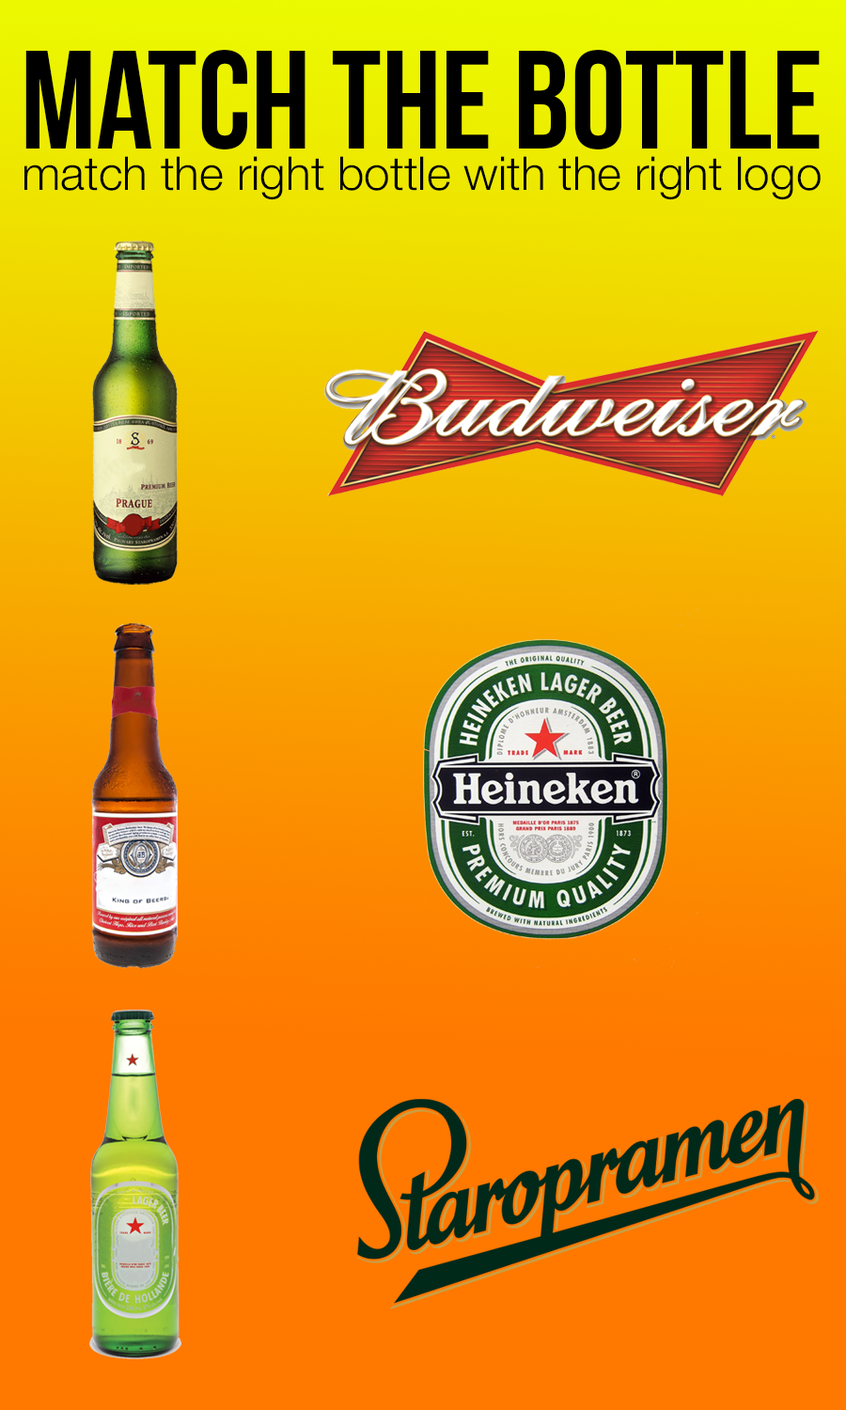
<style>
.page{position:relative;width:846px;height:1410px}
.page>*{position:absolute;margin:0}
.t1{font:139.3px "BebasNeue";color:#000000}
.t2{font:46.6px "HelveticaNeue-Light";color:#000000}
</style>
<div class="page">
<p class="t1" style="left:25px;top:50px;width:795px;height:99px">Match the bottle</p>
<p class="t2" style="left:24px;top:156px;width:796px;height:44px">match the right bottle with the right logo</p>
</div>
